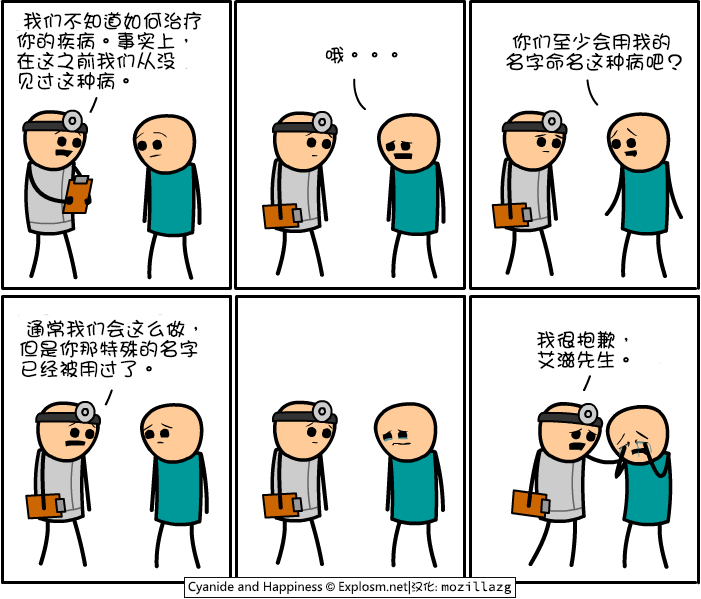
<style>
.page{position:relative;width:701px;height:599px;background:#ffffff}
.page>*{position:absolute;margin:0}
.t1{font:20px/20px "DFGirl";color:#000000}
.t2{font:20px "DFGirl";color:#000000}
</style>
<div class="page">
<p class="t1" style="left:16px;top:11px;width:186px;height:79px">我们不知道如何治疗<br>你的疾病。事实上，<br>在这之前我们从没<br>见过这种病。</p>
<p class="t1" style="left:506px;top:32px;width:176px;height:39px">你们至少会用我的<br>名字命名这种病吧？</p>
<p class="t2" style="left:325px;top:46px;width:73px;height:18px">哦。。。</p>
<p class="t1" style="left:20px;top:319px;width:178px;height:59px">通常我们会这么做，<br>但是你那特殊的名字<br>已经被用过了。</p>
<p class="t1" style="left:536px;top:330px;width:93px;height:39px">我很抱歉，<br>艾滋先生。</p>
</div>
